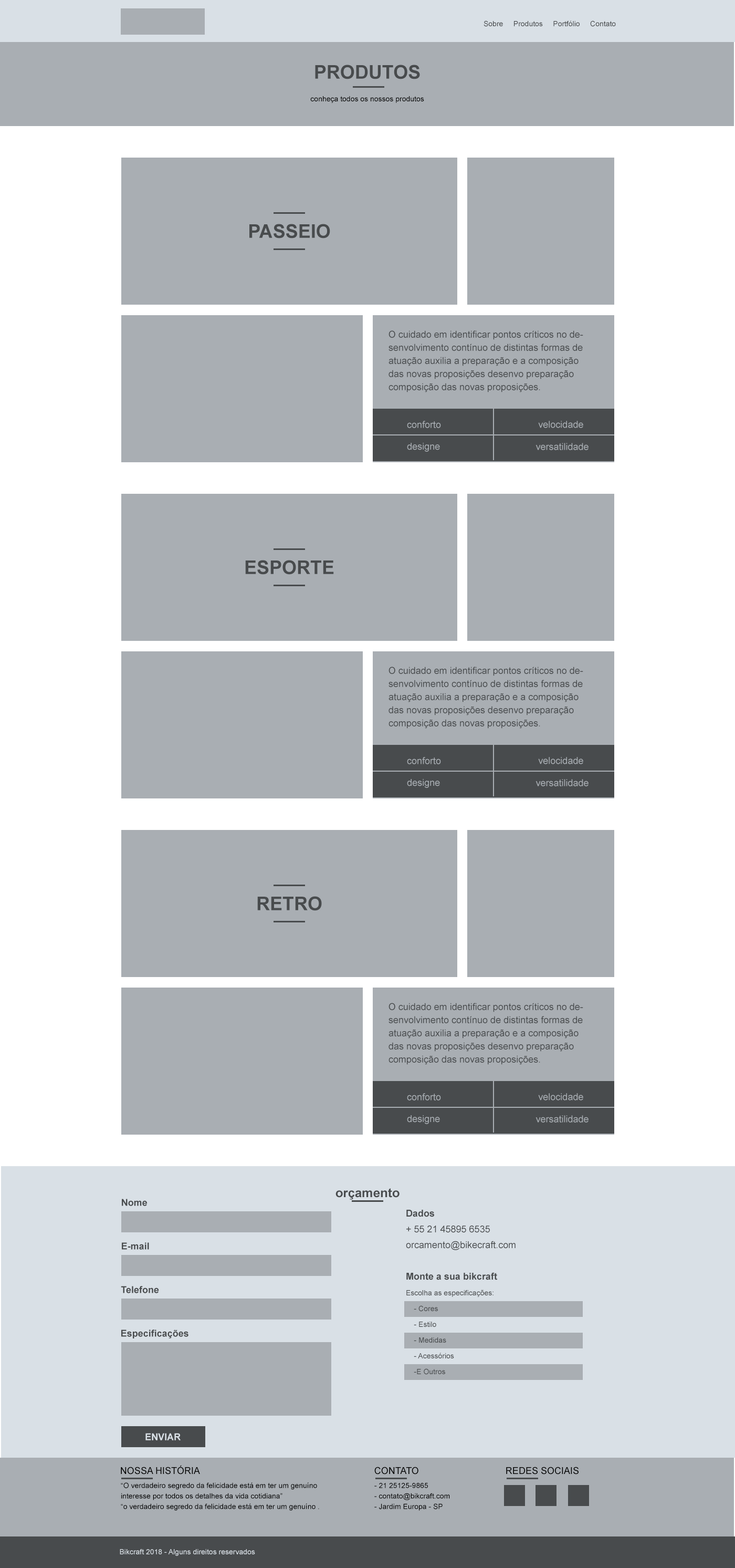
<style>
.page{position:relative;width:735px;height:1568px;background:#a9aeb3}
.page>*{position:absolute;margin:0}
.t1{font:7.4px "ArialMT";color:#484b4d}
.t2{font:18.9px "Arial-BoldMT";color:#484b4d;text-transform:uppercase}
.t3{font:7.4px "ArialMT";color:#000000}
.t4{font:9.5px/13.1px "ArialMT";color:#484b4d}
.t5{font:9.5px "ArialMT";color:#a9aeb3}
.t6{font:12.6px "Arial-BoldMT";color:#484b4d}
.t7{font:9.5px "Arial-BoldMT";color:#484b4d}
.t8{font:7.4px/15.8px "ArialMT";color:#484b4d}
.t9{font:9.5px/15.8px "Arial-BoldMT";color:#484b4d}
.t10{font:9.5px/15.8px "ArialMT";color:#484b4d}
.t11{font:9.5px "Arial-BoldMT";color:#d9e0e6}
.t12{font:9.5px "ArialMT";color:#000000;text-transform:uppercase}
.t13{font:7.4px/10.5px "ArialMT";color:#000000}
.t14{font:7.4px "ArialMT";color:#d9e0e6}
</style>
<div class="page">
<p class="t1" style="left:484px;top:20px;width:132px;height:7px">Sobre     Produtos     Portfólio     Contato</p>
<p class="t2" style="left:315px;top:65px;width:105px;height:14px">produtos</p>
<p class="t3" style="left:310px;top:96px;width:114px;height:7px">conheça todos os nossos produtos</p>
<p class="t2" style="left:250px;top:224px;width:80px;height:14px">passeio</p>
<p class="t4" style="left:389px;top:330px;width:195px;height:62px">O cuidado em identificar pontos críticos no desenvolvimento contínuo de distintas formas de atuação auxilia a preparação e a composição das novas proposições desenvo preparação composição das novas proposições.</p>
<p class="t5" style="left:407px;top:421px;width:34px;height:7px">conforto</p>
<p class="t5" style="left:538px;top:421px;width:46px;height:7px">velocidade</p>
<p class="t5" style="left:407px;top:443px;width:33px;height:9px">designe</p>
<p class="t5" style="left:536px;top:443px;width:53px;height:7px">versatilidade</p>
<p class="t2" style="left:245px;top:560px;width:89px;height:15px">esporte</p>
<p class="t4" style="left:389px;top:667px;width:195px;height:62px">O cuidado em identificar pontos críticos no desenvolvimento contínuo de distintas formas de atuação auxilia a preparação e a composição das novas proposições desenvo preparação composição das novas proposições.</p>
<p class="t5" style="left:407px;top:757px;width:34px;height:7px">conforto</p>
<p class="t5" style="left:538px;top:757px;width:46px;height:7px">velocidade</p>
<p class="t5" style="left:407px;top:779px;width:33px;height:9px">designe</p>
<p class="t5" style="left:536px;top:779px;width:53px;height:7px">versatilidade</p>
<p class="t2" style="left:257px;top:896px;width:65px;height:15px">retro</p>
<p class="t4" style="left:389px;top:1003px;width:195px;height:62px">O cuidado em identificar pontos críticos no desenvolvimento contínuo de distintas formas de atuação auxilia a preparação e a composição das novas proposições desenvo preparação composição das novas proposições.</p>
<p class="t5" style="left:407px;top:1093px;width:34px;height:7px">conforto</p>
<p class="t5" style="left:538px;top:1093px;width:46px;height:7px">velocidade</p>
<p class="t5" style="left:407px;top:1115px;width:33px;height:9px">designe</p>
<p class="t5" style="left:536px;top:1115px;width:53px;height:8px">versatilidade</p>
<p class="t6" style="left:336px;top:1188px;width:64px;height:12px">orçamento</p>
<p class="t7" style="left:122px;top:1199px;width:25px;height:7px">Nome</p>
<p class="t8" style="left:406px;top:1210px;width:110px;height:165px"><span class="t9">Dados<br></span><span class="t10">+ 55 21 45895 6535<br>orcamento@bikecraft.com<br><br></span><span class="t9">Monte a sua bikcraft<br></span>Escolha as especificações:<br>    - Cores<br>    - Estilo<br>    - Medidas<br>    - Acessórios<br>    -E Outros</p>
<p class="t7" style="left:122px;top:1242px;width:27px;height:8px">E-mail</p>
<p class="t7" style="left:121px;top:1286px;width:38px;height:7px">Telefone</p>
<p class="t7" style="left:121px;top:1330px;width:68px;height:8px">Especificações</p>
<p class="t11" style="left:146px;top:1433px;width:35px;height:7px">ENVIAR</p>
<p class="t12" style="left:121px;top:1465px;width:79px;height:9px">Nossa História</p>
<p class="t12" style="left:375px;top:1467px;width:44px;height:7px">contato</p>
<p class="t12" style="left:506px;top:1467px;width:73px;height:7px">redes sociais</p>
<p class="t13" style="left:121px;top:1482px;width:198px;height:29px">“O verdadeiro segredo da felicidade está em ter um genuíno interesse por todos os detalhes da vida cotidiana”<br>“o verdadeiro segredo da felicidade está em ter um genuíno .</p>
<p class="t13" style="left:375px;top:1483px;width:75px;height:28px">- 21 25125-9865<br>- contato@bikcraft.com<br>- Jardim Europa - SP</p>
<p class="t14" style="left:120px;top:1549px;width:135px;height:7px">Bikcraft 2018 - Alguns direitos reservados</p>
</div>
